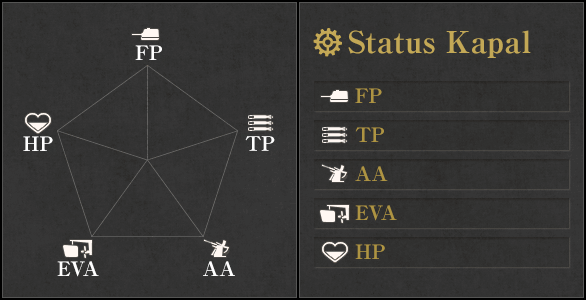
<style>
.page{position:relative;width:586px;height:300px}
.page>*{position:absolute;margin:0}
.t1{font:30px "RyuminPro-ExBold";color:#c3a856}
.t2{font:20px "RyuminPro-ExBold";color:#ffffff}
.t3{font:20px/39px "RyuminPro-ExBold";color:#ae9442}
</style>
<div class="page">
<p class="t1" style="left:348px;top:30px;width:183px;height:28px">Status Kapal</p>
<p class="t2" style="left:135px;top:45px;width:27px;height:15px">FP</p>
<p class="t3" style="left:355px;top:88px;width:42px;height:171px">FP<br>TP<br>AA<br>EVA<br>HP</p>
<p class="t2" style="left:23px;top:136px;width:30px;height:15px">HP</p>
<p class="t2" style="left:245px;top:136px;width:30px;height:15px">TP</p>
<p class="t2" style="left:57px;top:261px;width:42px;height:16px">EVA</p>
<p class="t2" style="left:203px;top:261px;width:32px;height:15px">AA</p>
</div>
